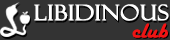
<style>
.page{position:relative;width:170px;height:40px;background:#333333}
.page>*{position:absolute;margin:0}
.t1{font:21.2px "FelixTitlingMT";color:#ffffff;font-weight:bold;scale:1.09 1}
.t2{font:21.2px "HarlowSolid";color:#f01414;scale:1.09 1}
</style>
<div class="page">
<p class="t1" style="left:34px;top:4px;width:135px;height:17px">libidinous</p>
<p class="t2" style="left:132px;top:23px;width:36px;height:15px">club</p>
</div>
